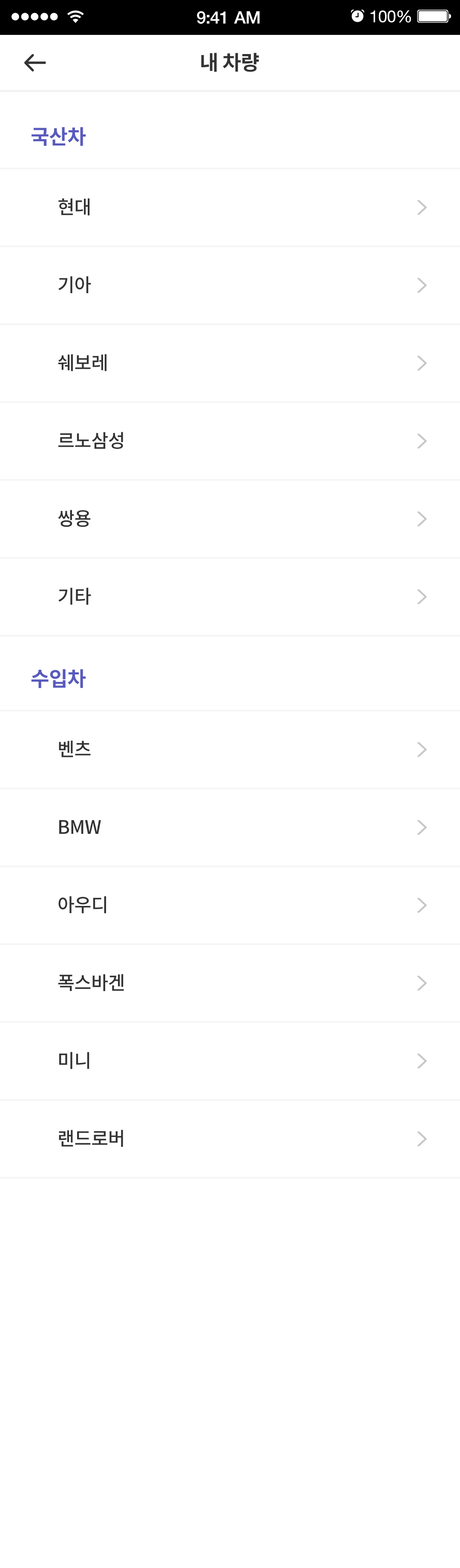
<style>
.page{position:relative;width:460px;height:1568px;background:#ffffff}
.page>*{position:absolute;margin:0}
.t1{font:17.1px "HelveticaNeue-Medium";letter-spacing:-0.02em;color:#ffffff}
.t2{font:16.4px "HelveticaNeue";letter-spacing:-0.02em;color:#ffffff}
.t3{font:20.4px "NotoSansCJKkr-Bold";letter-spacing:-0.02em;color:#333333}
.t4{font:20.4px "NotoSansCJKkr-Bold";letter-spacing:-0.02em;color:#585abd}
.t5{font:18.7px/77.9px "NotoSansCJKkr-Medium";letter-spacing:-0.02em;color:#333333}
</style>
<div class="page">
<p class="t1" style="left:197px;top:11px;width:63px;height:13px">9:41 AM</p>
<p class="t2" style="left:370px;top:10px;width:41px;height:13px">100%</p>
<p class="t3" style="left:201px;top:53px;width:58px;height:19px">내 차량</p>
<p class="t4" style="left:31px;top:127px;width:55px;height:19px">국산차</p>
<p class="t5" style="left:58px;top:198px;width:65px;height:407px">현대<br>기아<br>쉐보레<br>르노삼성<br>쌍용<br>기타</p>
<p class="t4" style="left:31px;top:669px;width:55px;height:19px">수입차</p>
<p class="t5" style="left:58px;top:740px;width:66px;height:407px">벤츠<br>BMW<br>아우디<br>폭스바겐<br>미니<br>랜드로버</p>
</div>
